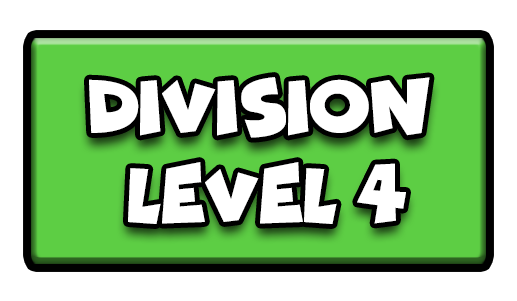
<style>
.page{position:relative;width:517px;height:301px;background:#ffffff}
.page>*{position:absolute;margin:0}
.t1{font:77.7px "Funhouse";color:#ffffff;scale:0.95 1}
</style>
<div class="page">
<p class="t1" style="left:89px;top:77px;width:341px;height:61px">DIVISION</p>
<p class="t1" style="left:128px;top:162px;width:278px;height:62px">LEVEL 4</p>
</div>
